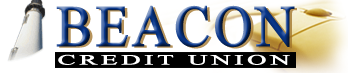
<style>
.page{position:relative;width:348px;height:73px;background:#ffffff}
.page>*{position:absolute;margin:0}
.t1{font:57.5px "TimesNewRomanPSMT";letter-spacing:0.045em;font-weight:bold;scale:0.93 1}
.t2{font:14px "TimesNewRomanPSMT";letter-spacing:0.12em;color:#ffffff;font-weight:bold;scale:1.91 1}
</style>
<div class="page">
<p class="t1" style="left:56px;top:5px;width:239px;height:43px">BEACON</p>
<p class="t1" style="left:59px;top:7px;width:238px;height:42px">BEACON</p>
<p class="t2" style="left:58px;top:54px;width:232px;height:11px">CREDIT UNION</p>
</div>
